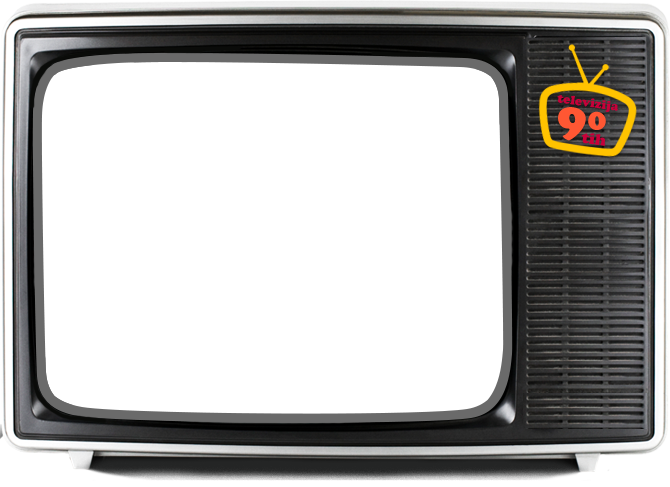
<style>
.page{position:relative;width:670px;height:487px;background:#ffffff}
.page>*{position:absolute;margin:0}
.t1{font:12.4px "CooperBlackStd";color:#c70039}
.t2{font:46.4px "CooperBlackStd";color:#ff5733}
.t3{font:30.4px "CooperBlackStd";color:#ff5733}
.t4{font:15.2px "CooperBlackStd";color:#c70039}
</style>
<div class="page">
<p class="t1" style="left:557px;top:95px;width:61px;height:17px;rotate:8deg">televizija</p>
<p class="t2" style="left:558px;top:107px;width:28px;height:34px;rotate:8deg">9</p>
<p class="t3" style="left:588px;top:111px;width:18px;height:19px;rotate:8deg">0</p>
<p class="t4" style="left:581px;top:133px;width:25px;height:13px;rotate:8deg">tih</p>
</div>
